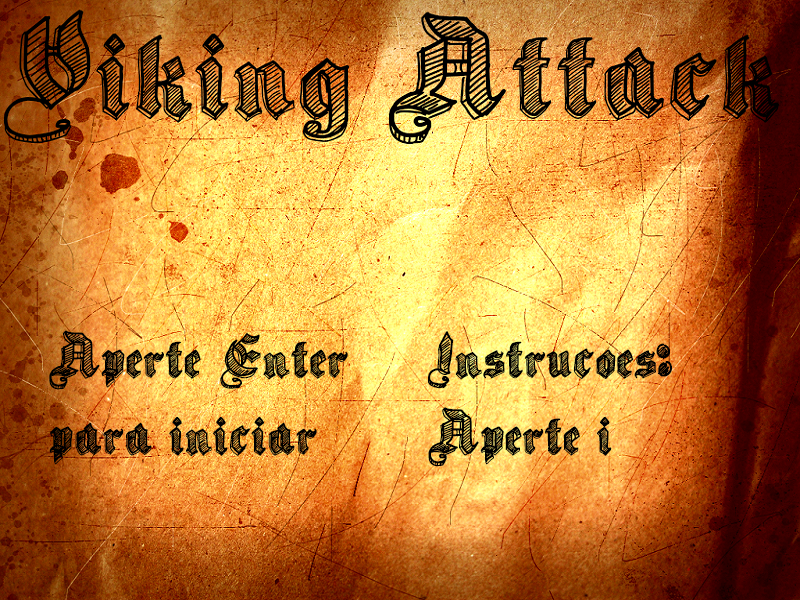
<style>
.page{position:relative;width:800px;height:600px}
.page>*{position:absolute;margin:0}
.t1{font:64px "SketchGothicSchool";color:#000000}
</style>
<div class="page">
<p class="t1" style="left:49px;top:330px;width:623px;height:137px">Aperte Enter     Instrucoes: <br>para iniciar       Aperte i</p>
</div>
